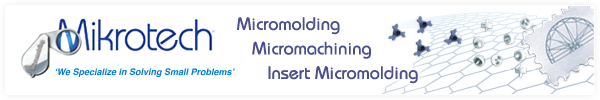
<style>
.page{position:relative;width:600px;height:100px;background:#ffffff}
.page>*{position:absolute;margin:0}
.t1{font:18px/24.5px "Bauhaus-Medium";letter-spacing:0.005em;color:#4a508e}
.t2{font:9px "Helvetica-BoldOblique";color:#007bd9}
</style>
<div class="page">
<p class="t1" style="left:237px;top:17px;width:181px;height:67px">Micromolding<br>   Micromachining<br>      Insert Micromolding</p>
<p class="t2" style="left:55px;top:68px;width:180px;height:9px">‘We Specialize in Solving Small Problems’</p>
</div>
